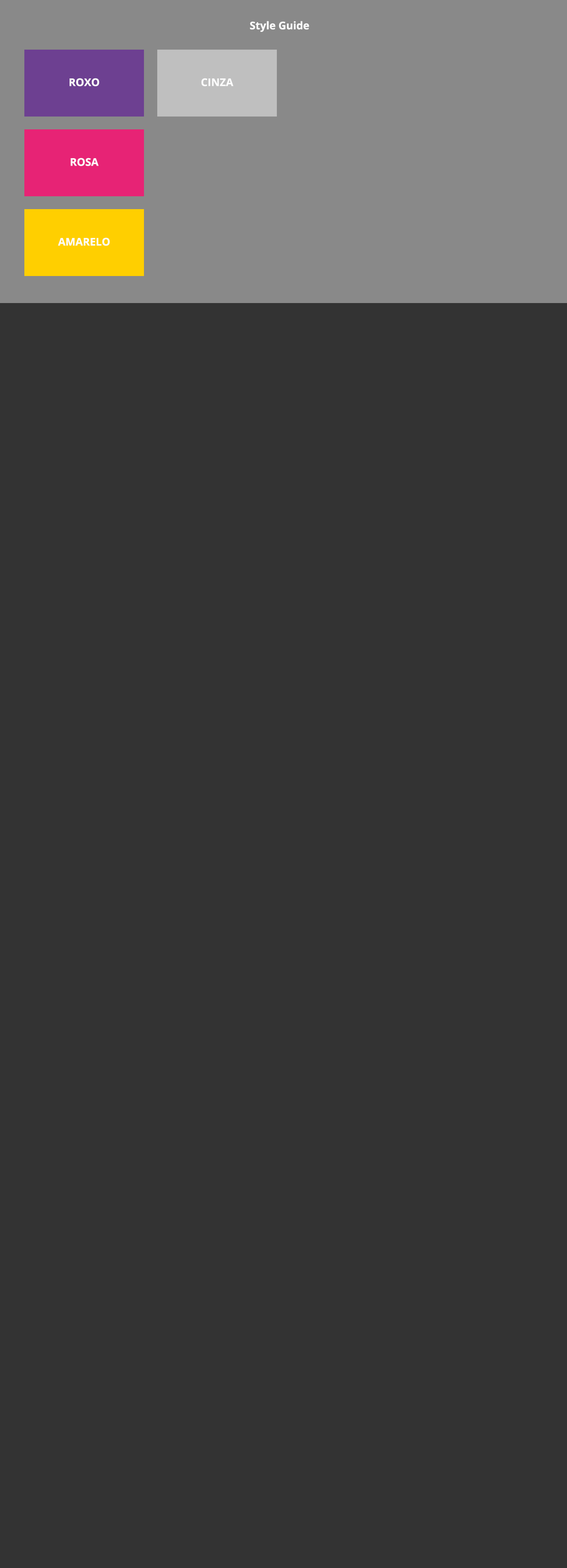
<style>
.page{position:relative;width:567px;height:1568px;background:#333333}
.page>*{position:absolute;margin:0}
.t1{font:10.6px "OpenSans-Bold";color:#fcfcfc}
</style>
<div class="page">
<p class="t1" style="left:250px;top:21px;width:59px;height:11px">Style Guide</p>
<p class="t1" style="left:70px;top:78px;width:29px;height:8px">ROXO</p>
<p class="t1" style="left:201px;top:78px;width:32px;height:8px">CINZA</p>
<p class="t1" style="left:70px;top:158px;width:29px;height:8px">ROSA</p>
<p class="t1" style="left:58px;top:237px;width:52px;height:9px">AMARELO</p>
</div>
